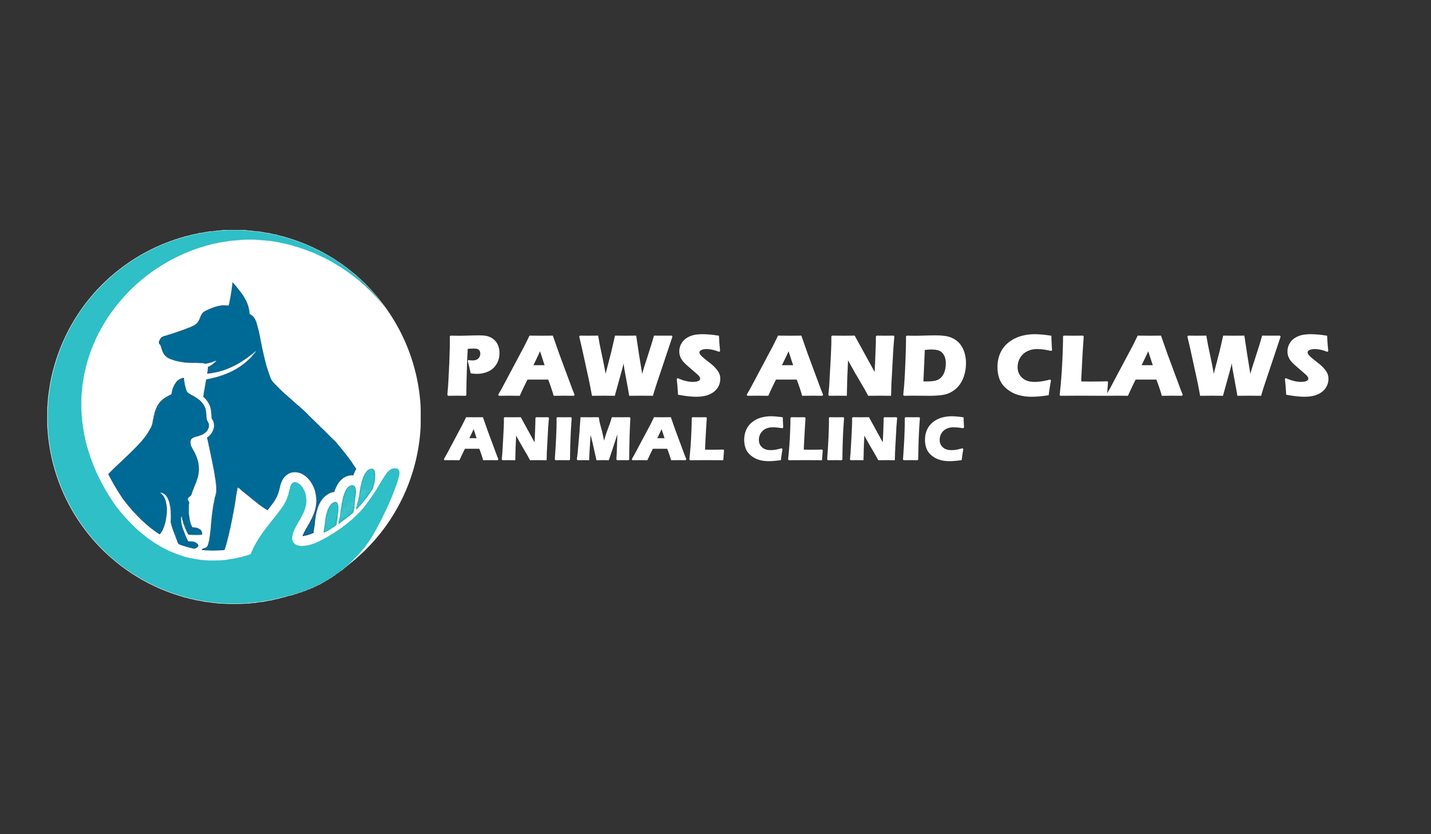
<style>
.page{position:relative;width:1431px;height:834px;background:#333333}
.page>*{position:absolute;margin:0}
.t1{font:88.3px "ErasITC-Bold";color:#ffffff;font-weight:bold}
.t2{font:62.4px "ErasITC-Bold";color:#ffffff;font-weight:bold}
</style>
<div class="page">
<p class="t1" style="left:447px;top:334px;width:882px;height:63px">PAWS AND CLAWS</p>
<p class="t2" style="left:443px;top:416px;width:521px;height:45px">ANIMAL CLINIC</p>
</div>
